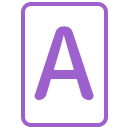
<style>
.page{position:relative;width:128px;height:128px;background:#ffffff}
.page>*{position:absolute;margin:0}
.t1{font:100px "GenJyuuGothic-Medium";color:#9d60cc}
</style>
<div class="page">
<p class="t1" style="left:34px;top:26px;width:60px;height:74px">A</p>
</div>
